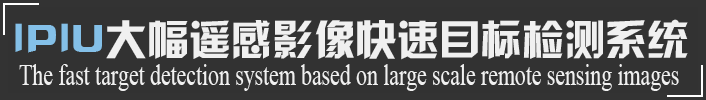
<style>
.page{position:relative;width:706px;height:100px;background:#323232}
.page>*{position:absolute;margin:0}
.t1{font:41.7px "HYk2gj";color:#f0f0f0}
.t2{font:41.7px "HYk2gj";color:#84c0e8}
.t3{font:30px "TimesNewRomanPSMT";color:#f0f0f0;scale:0.72 1}
</style>
<div class="page">
<p class="t1" style="left:15px;top:19px;width:673px;height:41px"><span class="t2">IPIU</span>大幅遥感影像快速目标检测系统</p>
<p class="t3" style="left:19px;top:64px;width:660px;height:27px">The fast target detection system based on large scale remote sensing images</p>
</div>
